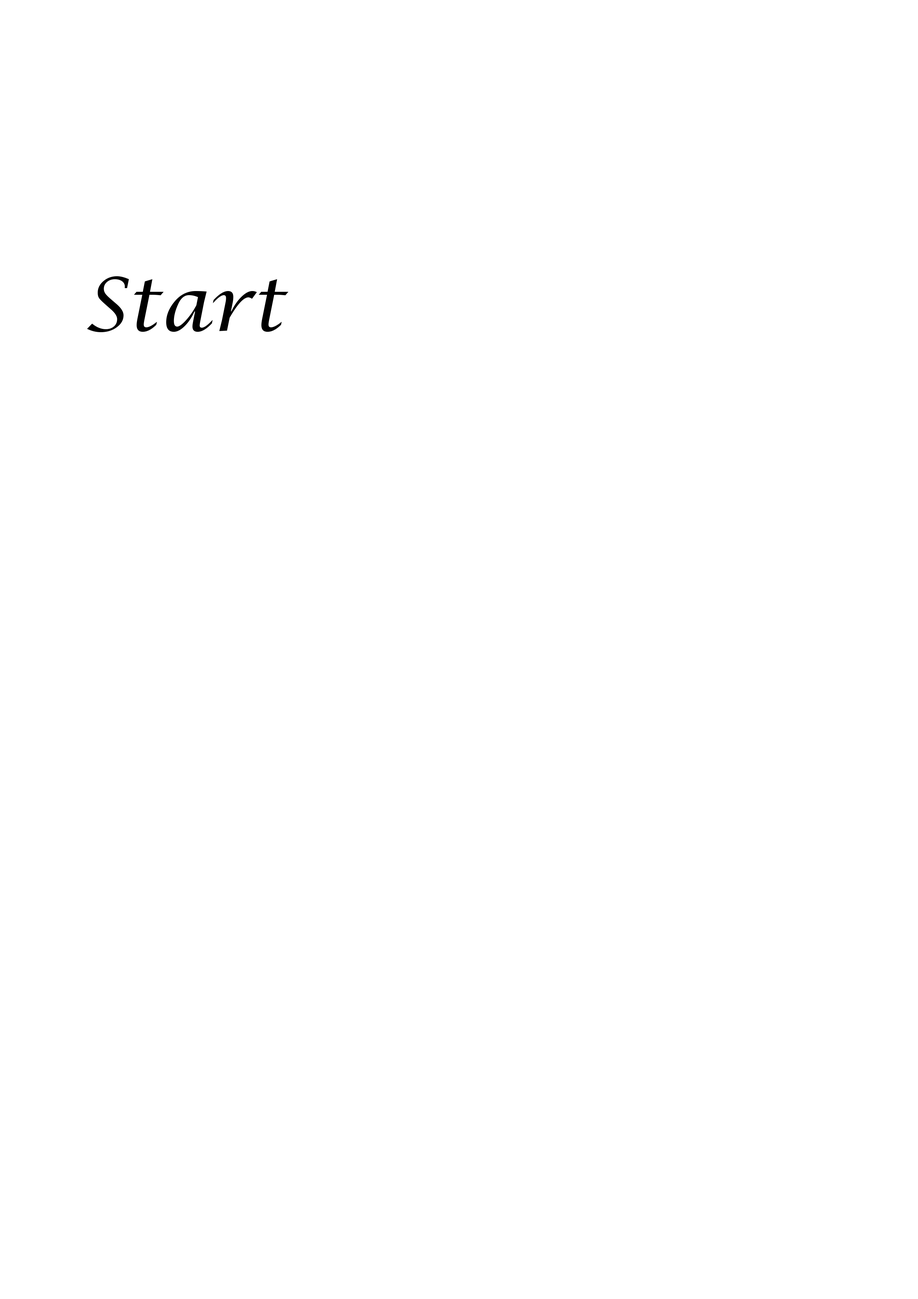
<style>
.page{position:relative;width:918px;height:1299px;background:#ffffff}
.page>*{position:absolute;margin:0}
.t1{font:74px "LucidaCalligraphy-Italic";color:#000000}
</style>
<div class="page">
<p class="t1" style="left:87px;top:276px;width:201px;height:56px">Start</p>
</div>
